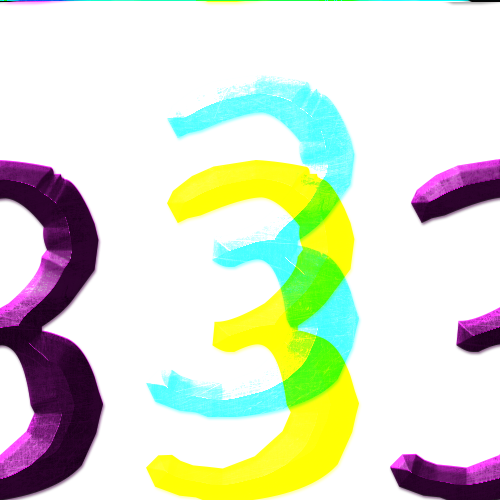
<style>
.page{position:relative;width:500px;height:500px;background:#ffffff}
.page>*{position:absolute;margin:0}
.t1{font:500px "PiecesofEight"}
</style>
<div class="page">
<p class="t1" style="left:146px;top:74px;width:213px;height:342px">3</p>
</div>
